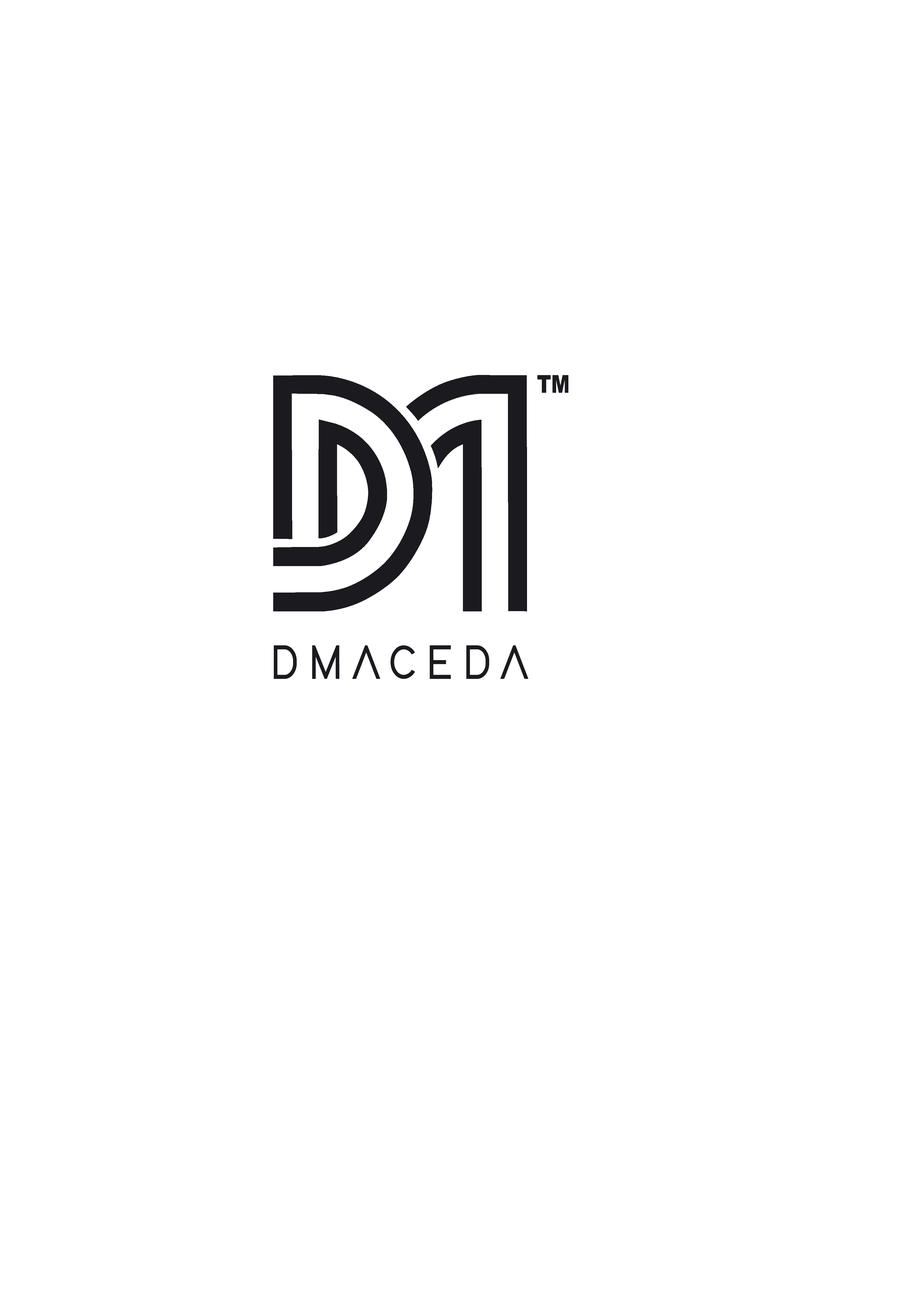
<style>
.page{position:relative;width:918px;height:1299px;background:#ffffff}
.page>*{position:absolute;margin:0}
.t1{font:24.5px "Arial-Black";color:#1b1a1f;scale:0.8 1}
.t2{font:49px "Adam-Medium";letter-spacing:0.2em;color:#1b1a1f;scale:0.89 1}
.t3{font:49px "Adam-Bold";letter-spacing:0.2em;color:#1b1a1f;scale:0.89 1}
</style>
<div class="page">
<p class="t1" style="left:537px;top:375px;width:32px;height:18px">TM</p>
<p class="t2" style="left:274px;top:645px;width:254px;height:34px">DMACEDA</p>
<p class="t3" style="left:274px;top:645px;width:254px;height:34px">DMACEDA</p>
</div>
